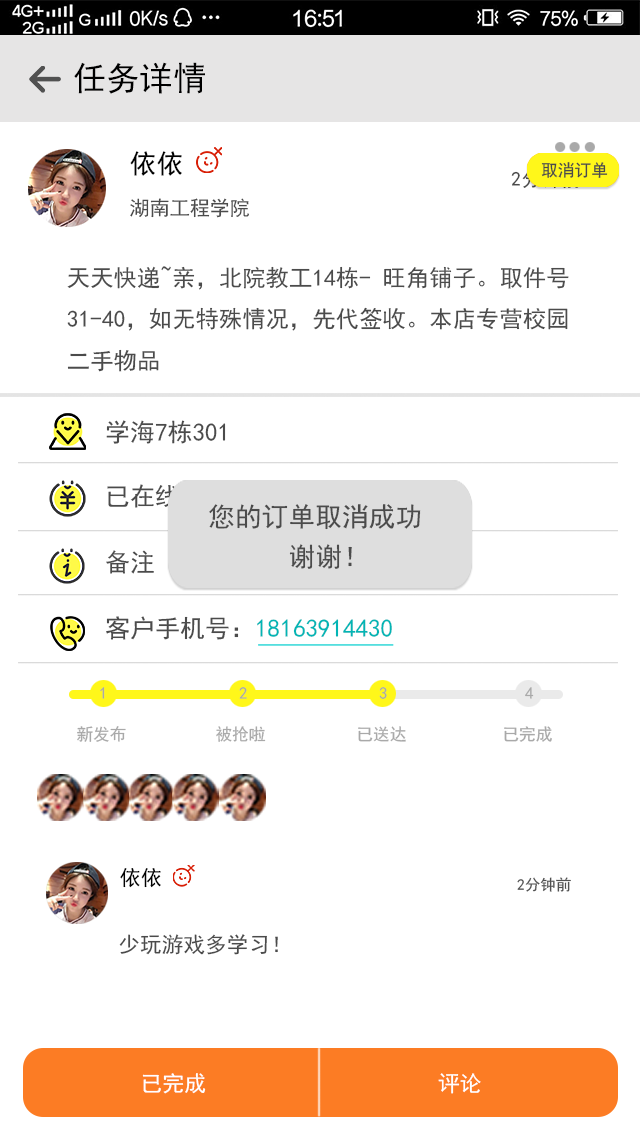
<style>
.page{position:relative;width:640px;height:1136px;background:#ffffff}
.page>*{position:absolute;margin:0}
.t1{font:33.3px "SimHei";letter-spacing:0.002em;color:#000000}
.t2{font:26.7px "SimHei";letter-spacing:0.002em;color:#010101}
.t3{font:16.7px "SimHei";letter-spacing:0.002em;color:#4b4b4b}
.t4{font:20px "SimHei";letter-spacing:0.002em;color:#4b4b4b}
.t5{font:23.3px/41.5px "SimHei";letter-spacing:0.002em;color:#4b4b4b}
.t6{font:25px "SimHei";letter-spacing:0.002em;color:#4b4b4b}
.t7{font:25px "SimHei";letter-spacing:0.002em}
.t8{font:26.7px/39.8px "SimHei";letter-spacing:0.002em;color:#4b4b4b}
.t9{font:25px "SimHei";letter-spacing:0.002em;color:#02b5b5}
.t10{font:16.7px "SimHei";letter-spacing:0.002em;color:#a9a9a9}
.t11{font:21.1px "SimHei";letter-spacing:0.002em;color:#010101}
.t12{font:15.4px "SimHei";letter-spacing:0.002em;color:#515151}
.t13{font:21.5px "SimHei";letter-spacing:0.002em;color:#4b4b4b}
.t14{font:21.7px "SimHei";letter-spacing:0.002em;color:#ffffff}
</style>
<div class="page">
<p class="t1" style="left:74px;top:62px;width:131px;height:32px">任务详情</p>
<p class="t2" style="left:130px;top:151px;width:52px;height:25px">依依</p>
<p class="t3" style="left:541px;top:162px;width:67px;height:16px">取消订单</p>
<p class="t4" style="left:130px;top:198px;width:119px;height:20px">湖南工程学院</p>
<p class="t5" style="left:67px;top:266px;width:502px;height:106px">天天快递~亲，北院教工14栋- 旺角铺子。取件号<br>31-40，如无特殊情况，先代签收。本店专营校园<br>二手物品</p>
<p class="t6" style="left:106px;top:420px;width:120px;height:24px">学海7栋301</p>
<p class="t7" style="left:107px;top:484px;width:185px;height:24px">已在线支付：3元</p>
<p class="t8" style="left:209px;top:504px;width:212px;height:65px">您的订单取消成功<br>      谢谢！</p>
<p class="t6" style="left:106px;top:550px;width:48px;height:24px">备注</p>
<p class="t9" style="left:106px;top:616px;width:286px;height:24px"><span class="t6">客户手机号：</span>18163914430</p>
<p class="t10" style="left:100px;top:687px;width:5px;height:12px">1</p>
<p class="t10" style="left:239px;top:687px;width:8px;height:12px">2</p>
<p class="t10" style="left:379px;top:687px;width:8px;height:12px">3</p>
<p class="t10" style="left:525px;top:687px;width:9px;height:12px">4</p>
<p class="t10" style="left:77px;top:726px;width:49px;height:16px">新发布</p>
<p class="t10" style="left:216px;top:726px;width:50px;height:16px">被抢啦</p>
<p class="t10" style="left:358px;top:726px;width:48px;height:16px">已送达</p>
<p class="t10" style="left:504px;top:726px;width:48px;height:16px">已完成</p>
<p class="t11" style="left:120px;top:868px;width:41px;height:20px">依依</p>
<p class="t12" style="left:517px;top:877px;width:54px;height:15px">2分钟前</p>
<p class="t13" style="left:119px;top:934px;width:159px;height:21px">少玩游戏多学习！</p>
<p class="t14" style="left:142px;top:1073px;width:64px;height:21px">已完成</p>
<p class="t14" style="left:438px;top:1073px;width:43px;height:21px">评论</p>
</div>
